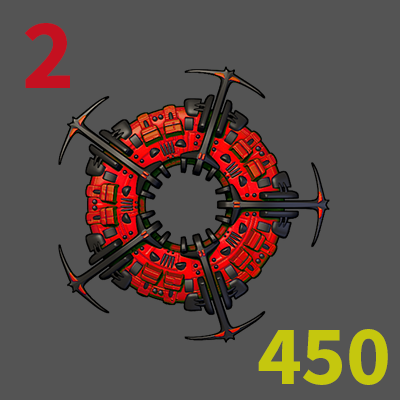
<style>
.page{position:relative;width:400px;height:400px;background:#545454}
.page>*{position:absolute;margin:0}
.t1{font:100px "SourceSansPro-Bold";color:#c51020}
.t2{font:85px "SourceSansPro-Bold";color:#c5c70e}
</style>
<div class="page">
<p class="t1" style="left:24px;top:23px;width:46px;height:65px">2</p>
<p class="t2" style="left:258px;top:329px;width:130px;height:56px">450</p>
</div>
